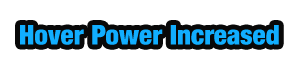
<style>
.page{position:relative;width:300px;height:70px;background:#ffffff}
.page>*{position:absolute;margin:0}
.t1{font:27px "Harvest";color:#11aeff}
</style>
<div class="page">
<p class="t1" style="left:20px;top:25px;width:259px;height:20px">Hover Power Increased</p>
</div>
